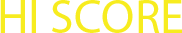
<style>
.page{position:relative;width:182px;height:33px;background:#ffffff}
.page>*{position:absolute;margin:0}
.t1{font:48px "MyriadPro-Regular";color:#f7ec1f}
</style>
<div class="page">
<p class="t1" style="left:0px;top:0px;width:182px;height:33px">HI SCORE</p>
</div>
